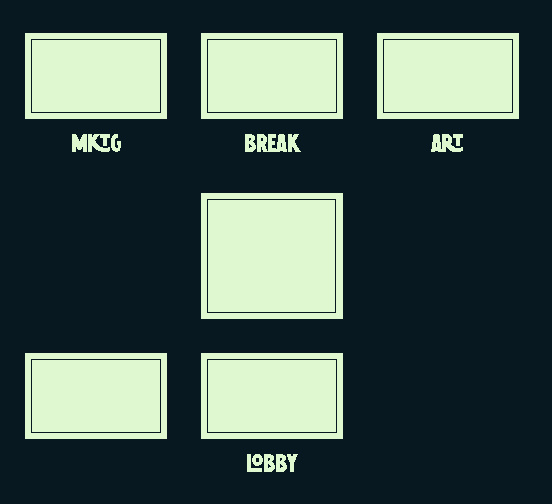
<style>
.page{position:relative;width:552px;height:504px;background:#071821}
.page>*{position:absolute;margin:0}
.t1{font:24px "ChillowRegular";letter-spacing:-0.025em;color:#e0f8cf}
</style>
<div class="page">
<p class="t1" style="left:72px;top:134px;width:49px;height:18px">mktg</p>
<p class="t1" style="left:245px;top:134px;width:56px;height:18px">break</p>
<p class="t1" style="left:431px;top:134px;width:32px;height:18px">art</p>
<p class="t1" style="left:247px;top:454px;width:51px;height:18px">lobby</p>
</div>
